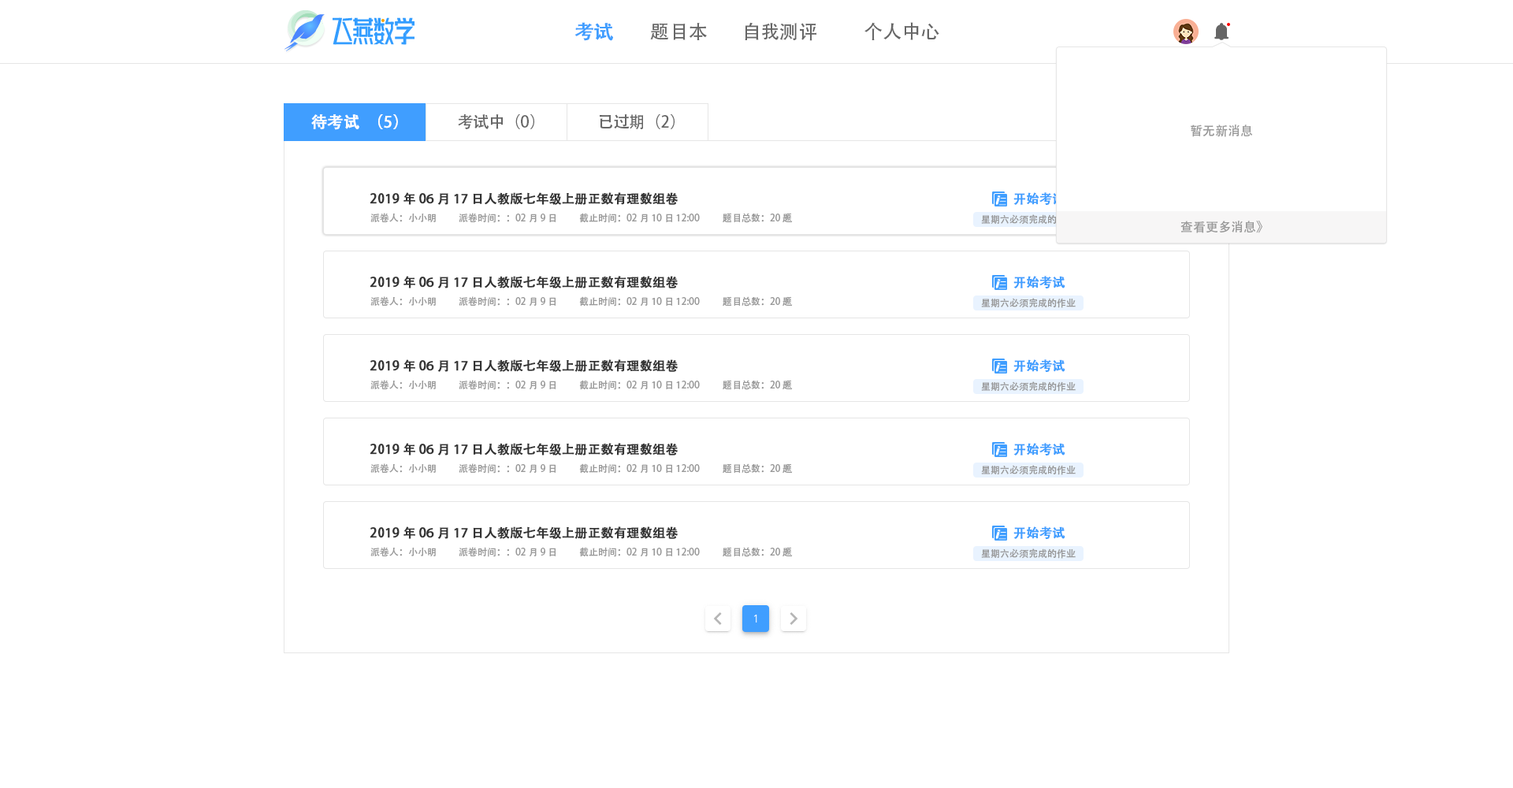
<style>
.page{position:relative;width:1513px;height:788px;background:#ffffff}
.page>*{position:absolute;margin:0}
.t1{font:18.9px "AdobeHeitiStd-Regular";color:#409eff;font-weight:bold}
.t2{font:18.9px "AdobeHeitiStd-Regular";color:#666666}
.t3{font:15.8px "AdobeHeitiStd-Regular";color:#ffffff;font-weight:bold}
.t4{font:15.8px "AdobeHeitiStd-Regular";color:#666666}
.t5{font:12.6px "AdobeHeitiStd-Regular";color:#999999}
.t6{font:12.6px "AdobeHeitiStd-Regular";color:#333333;font-weight:bold}
.t7{font:12.6px "AdobeHeitiStd-Regular";color:#409eff;font-weight:bold}
.t8{font:9.5px "AdobeHeitiStd-Regular";color:#999999}
</style>
<div class="page">
<p class="t1" style="left:575px;top:22px;width:38px;height:19px">考试</p>
<p class="t2" style="left:650px;top:23px;width:57px;height:17px">题目本</p>
<p class="t2" style="left:745px;top:22px;width:71px;height:19px">自我测评</p>
<p class="t2" style="left:865px;top:22px;width:74px;height:18px">个人中心</p>
<p class="t3" style="left:311px;top:114px;width:87px;height:16px">待考试（5）</p>
<p class="t4" style="left:458px;top:114px;width:76px;height:15px">考试中（0）</p>
<p class="t4" style="left:600px;top:114px;width:75px;height:15px">已过期（2）</p>
<p class="t5" style="left:1191px;top:125px;width:62px;height:12px">暂无新消息</p>
<p class="t6" style="left:370px;top:192px;width:309px;height:13px">2019年06月17日人教版七年级上册正数有理数组卷</p>
<p class="t7" style="left:1013px;top:192px;width:52px;height:14px">开始考试</p>
<p class="t8" style="left:370px;top:213px;width:66px;height:9px">派卷人：小小明</p>
<p class="t8" style="left:459px;top:213px;width:97px;height:10px">派卷时间：：02月9日</p>
<p class="t8" style="left:579px;top:213px;width:121px;height:10px">截止时间：02月10日 12:00</p>
<p class="t8" style="left:723px;top:213px;width:70px;height:10px">题目总数：20题</p>
<p class="t8" style="left:981px;top:214px;width:95px;height:11px">星期六必须完成的作业</p>
<p class="t5" style="left:1181px;top:221px;width:81px;height:12px">查看更多消息》</p>
<p class="t6" style="left:370px;top:276px;width:309px;height:12px">2019年06月17日人教版七年级上册正数有理数组卷</p>
<p class="t7" style="left:1013px;top:276px;width:52px;height:13px">开始考试</p>
<p class="t8" style="left:370px;top:296px;width:66px;height:10px">派卷人：小小明</p>
<p class="t8" style="left:459px;top:296px;width:97px;height:11px">派卷时间：：02月9日</p>
<p class="t8" style="left:579px;top:296px;width:121px;height:11px">截止时间：02月10日 12:00</p>
<p class="t8" style="left:723px;top:296px;width:70px;height:11px">题目总数：20题</p>
<p class="t8" style="left:981px;top:298px;width:95px;height:10px">星期六必须完成的作业</p>
<p class="t6" style="left:370px;top:359px;width:309px;height:13px">2019年06月17日人教版七年级上册正数有理数组卷</p>
<p class="t7" style="left:1013px;top:359px;width:52px;height:14px">开始考试</p>
<p class="t8" style="left:370px;top:380px;width:66px;height:9px">派卷人：小小明</p>
<p class="t8" style="left:459px;top:380px;width:97px;height:10px">派卷时间：：02月9日</p>
<p class="t8" style="left:579px;top:380px;width:121px;height:10px">截止时间：02月10日 12:00</p>
<p class="t8" style="left:723px;top:380px;width:70px;height:10px">题目总数：20题</p>
<p class="t8" style="left:981px;top:381px;width:95px;height:11px">星期六必须完成的作业</p>
<p class="t6" style="left:370px;top:443px;width:309px;height:13px">2019年06月17日人教版七年级上册正数有理数组卷</p>
<p class="t7" style="left:1013px;top:443px;width:52px;height:13px">开始考试</p>
<p class="t8" style="left:370px;top:463px;width:66px;height:10px">派卷人：小小明</p>
<p class="t8" style="left:459px;top:463px;width:97px;height:11px">派卷时间：：02月9日</p>
<p class="t8" style="left:579px;top:463px;width:121px;height:11px">截止时间：02月10日 12:00</p>
<p class="t8" style="left:723px;top:463px;width:70px;height:11px">题目总数：20题</p>
<p class="t8" style="left:981px;top:465px;width:95px;height:10px">星期六必须完成的作业</p>
<p class="t6" style="left:370px;top:526px;width:309px;height:13px">2019年06月17日人教版七年级上册正数有理数组卷</p>
<p class="t7" style="left:1013px;top:526px;width:52px;height:14px">开始考试</p>
<p class="t8" style="left:370px;top:547px;width:66px;height:9px">派卷人：小小明</p>
<p class="t8" style="left:459px;top:547px;width:97px;height:10px">派卷时间：：02月9日</p>
<p class="t8" style="left:579px;top:547px;width:121px;height:10px">截止时间：02月10日 12:00</p>
<p class="t8" style="left:723px;top:547px;width:70px;height:10px">题目总数：20题</p>
<p class="t8" style="left:981px;top:548px;width:95px;height:11px">星期六必须完成的作业</p>
</div>
